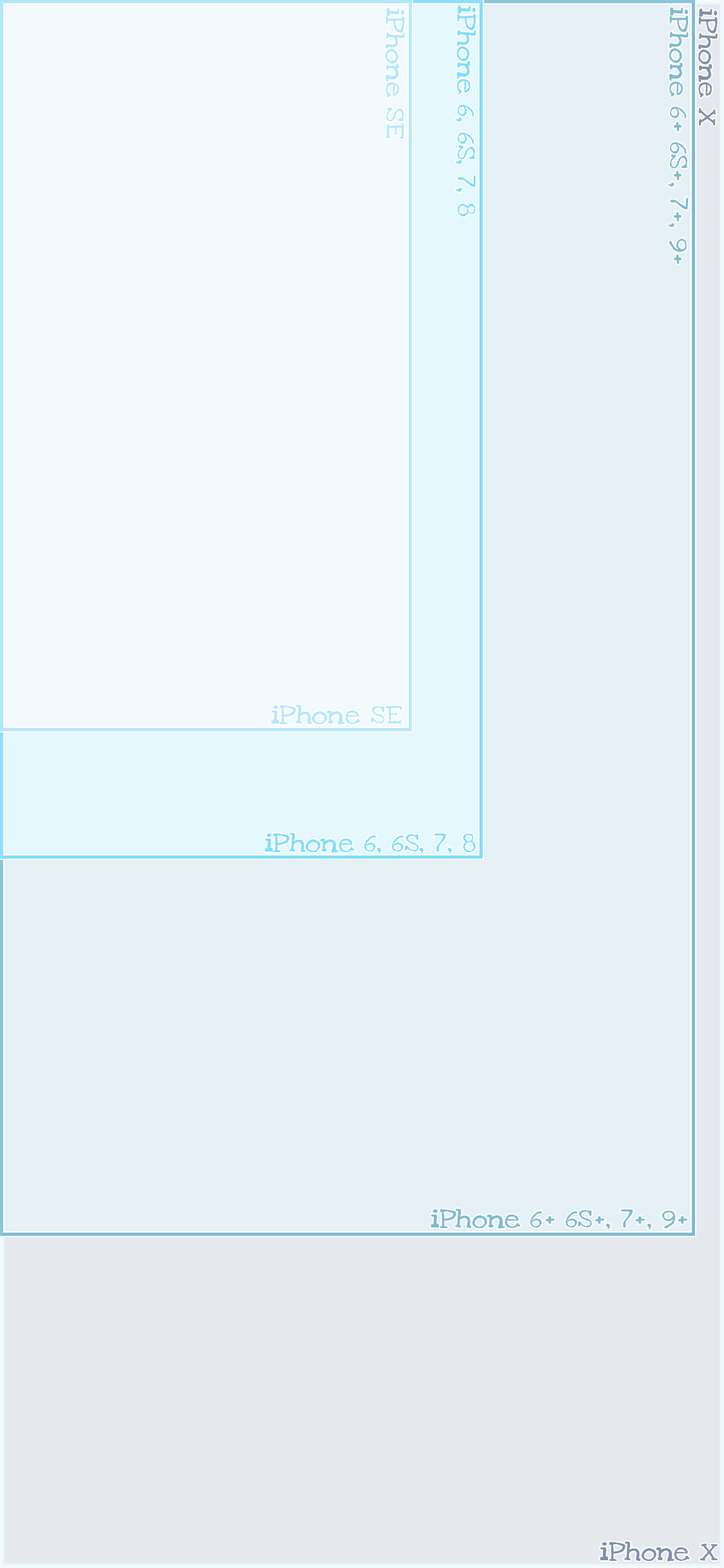
<style>
.page{position:relative;width:724px;height:1568px;background:#e5f1f6}
.page>*{position:absolute;margin:0}
.t1{font:18.5px "LoveYaLikeASisterSolid";letter-spacing:-0.02em;color:#7fdff9;scale:1.25 1}
.t2{font:18.5px "LoveYaLikeASisterSolid";letter-spacing:-0.02em;color:#b6e7fa;scale:1.25 1}
.t3{font:18.5px "LoveYaLikeASisterSolid";letter-spacing:-0.02em;color:#7fbad1;scale:1.25 1}
.t4{font:18.5px "LoveYaLikeASisterSolid";letter-spacing:-0.02em;color:#7f90ab;scale:1.25 1}
</style>
<div class="page">
<p class="t1" style="left:456px;top:5px;width:20px;height:212px;rotate:90deg">iPhone 6, 6S, 7, 8</p>
<p class="t2" style="left:386px;top:8px;width:19px;height:131px;rotate:90deg">iPhone SE</p>
<p class="t3" style="left:668px;top:7px;width:21px;height:257px;rotate:90deg">iPhone 6+ 6S+, 7+, 9+</p>
<p class="t4" style="left:698px;top:8px;width:20px;height:118px;rotate:90deg">iPhone X</p>
<p class="t2" style="left:271px;top:705px;width:131px;height:20px">iPhone SE</p>
<p class="t1" style="left:265px;top:833px;width:211px;height:21px">iPhone 6, 6S, 7, 8</p>
<p class="t3" style="left:431px;top:1209px;width:256px;height:20px">iPhone 6+ 6S+, 7+, 9+</p>
<p class="t4" style="left:600px;top:1542px;width:118px;height:20px">iPhone X</p>
</div>
